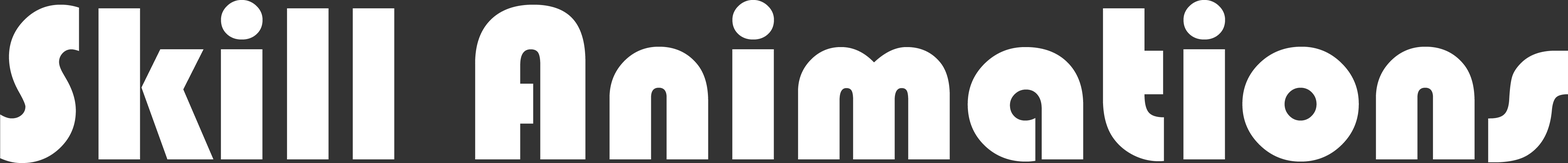
<style>
.page{position:relative;width:1568px;height:163px;background:#ffffff}
.page>*{position:absolute;margin:0}
.t1{font:227px "Bauhaus93";color:#ffffff}
</style>
<div class="page">
<p class="t1" style="left:0px;top:0px;width:1568px;height:163px">Skill Animations</p>
</div>
